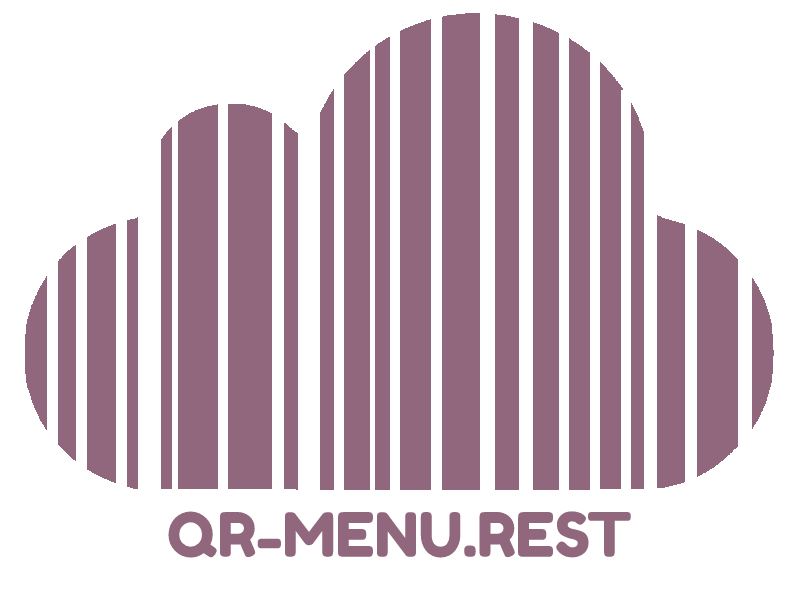
<style>
.page{position:relative;width:800px;height:600px;background:#ffffff}
.page>*{position:absolute;margin:0}
.t1{font:61px "FredokaOne-Regular";color:#91677d}
</style>
<div class="page">
<p class="t1" style="left:168px;top:511px;width:463px;height:47px">QR-MENU.REST</p>
</div>
